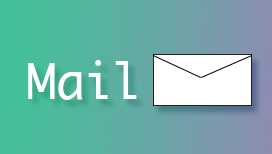
<style>
.page{position:relative;width:272px;height:154px}
.page>*{position:absolute;margin:0}
.t1{font:48px "Ayuthaya";color:#ffffff}
</style>
<div class="page">
<p class="t1" style="left:28px;top:60px;width:109px;height:40px">Mail</p>
</div>
